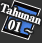
<style>
.page{position:relative;width:42px;height:43px;background:#333333}
.page>*{position:absolute;margin:0}
.t1{font:11px/14px "RyuminPro-ExBold";letter-spacing:-0.08em;color:#ffffff;font-weight:bold}
.t2{font:13px/14px "RyuminPro-ExBold";color:#ffffff;font-weight:bold}
.t3{font:13px/14px "WineArial";color:#ffffff;font-weight:bold}
</style>
<div class="page">
<p class="t1" style="left:0px;top:3px;width:41px;height:30px;text-align:center;rotate:19deg">Tahunan<br><span class="t2">  01 </span><span class="t3">~</span></p>
</div>
